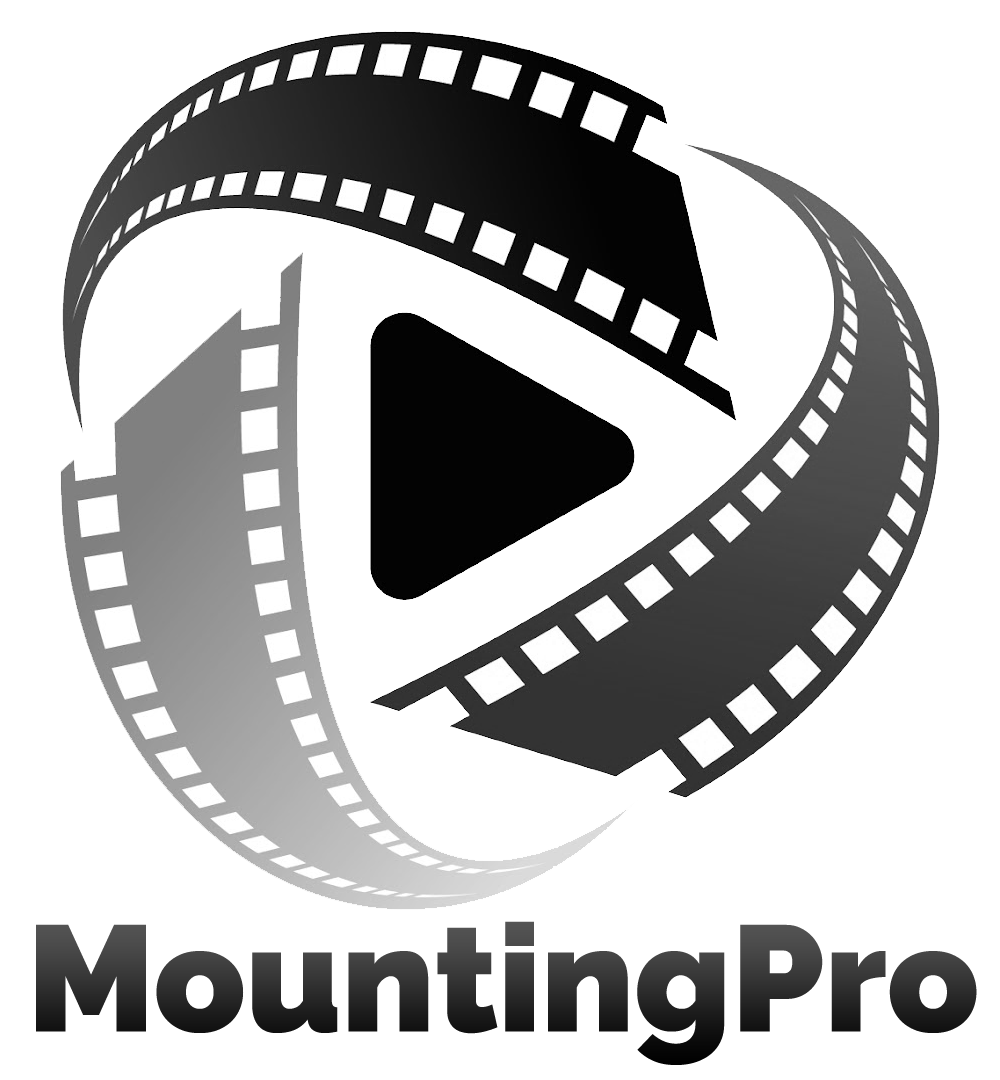
<style>
.page{position:relative;width:1000px;height:1080px;background:#ffffff}
.page>*{position:absolute;margin:0}
.t1{font:150px "Raleway-Black"}
</style>
<div class="page">
<p class="t1" style="left:36px;top:921px;width:941px;height:144px">MountingPro</p>
</div>
